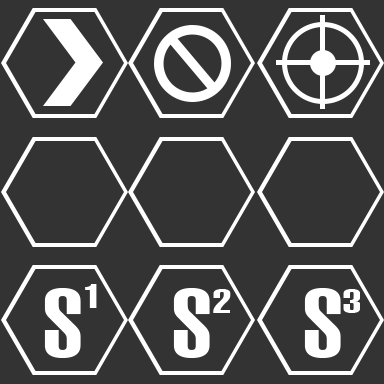
<style>
.page{position:relative;width:384px;height:384px;background:#333333}
.page>*{position:absolute;margin:0}
.t1{font:93.6px "Swiss911BT-UltraCompressed";letter-spacing:0.01em;color:#ffffff;text-transform:uppercase;scale:1.37 1}
.t2{font:33.6px "Swiss911BT-UltraCompressed";letter-spacing:0.01em;color:#ffffff;text-transform:uppercase;scale:1.79 1}
</style>
<div class="page">
<p class="t1" style="left:44px;top:288px;width:37px;height:70px">S</p>
<p class="t2" style="left:85px;top:284px;width:12px;height:24px">1</p>
<p class="t1" style="left:173px;top:288px;width:37px;height:70px">S</p>
<p class="t2" style="left:213px;top:289px;width:18px;height:24px">2</p>
<p class="t1" style="left:304px;top:288px;width:37px;height:70px">S</p>
<p class="t2" style="left:343px;top:289px;width:17px;height:24px">3</p>
</div>
